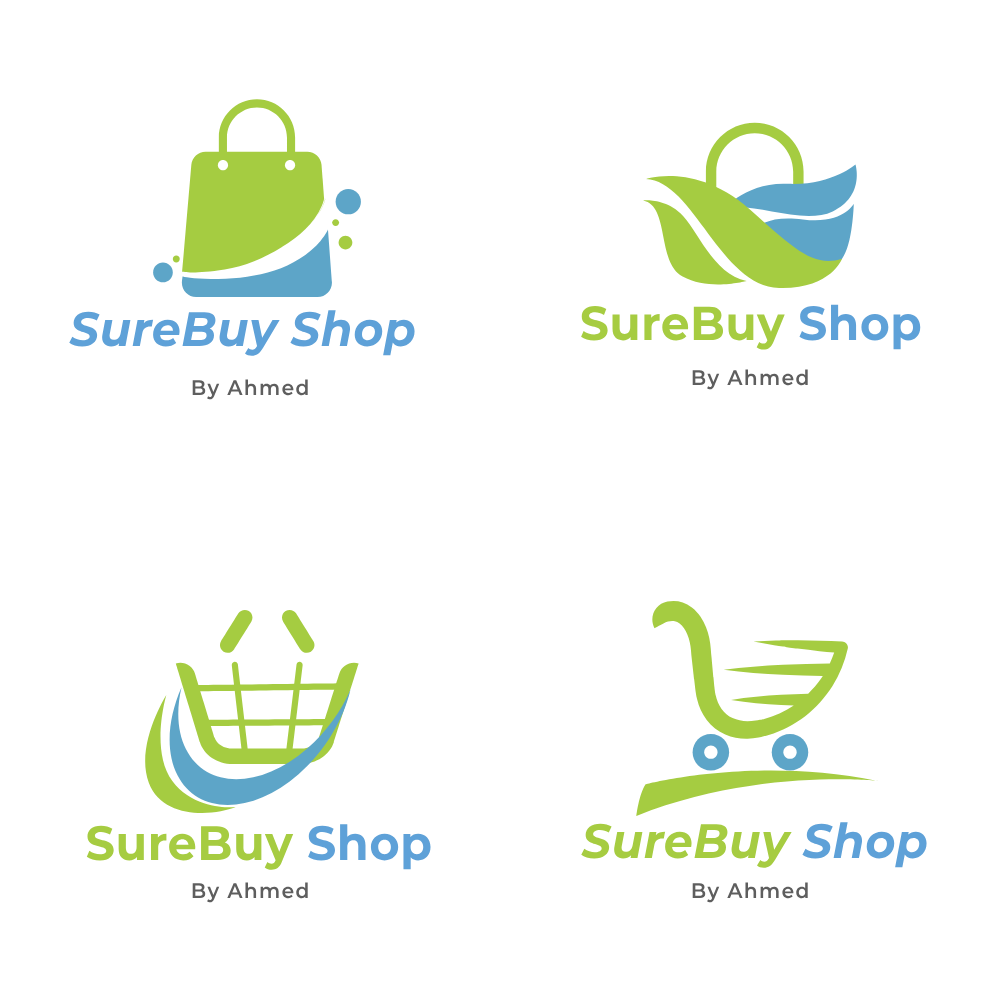
<style>
.page{position:relative;width:1000px;height:1000px;background:#ffffff}
.page>*{position:absolute;margin:0}
.t1{font:47.6px "Montserrat-Bold";letter-spacing:0.01em;color:#a6cc41;scale:0.96 1}
.t2{font:47.6px "Montserrat-Bold";letter-spacing:0.01em;color:#5ea1d8;scale:0.96 1}
.t3{font:48.2px "Montserrat-BoldItalic";letter-spacing:0.01em;color:#5ea1d8;scale:0.96 1}
.t4{font:21.1px "Montserrat-SemiBold";letter-spacing:0.064em;color:#5e5e5e;scale:0.96 1}
.t5{font:48.2px "Montserrat-BoldItalic";letter-spacing:0.01em;color:#a6cc41;scale:0.96 1}
.t6{font:48.2px "Montserrat-Bold";letter-spacing:0.01em;color:#a6cc41;scale:0.96 1}
.t7{font:48.2px "Montserrat-Bold";letter-spacing:0.01em;color:#5ea1d8;scale:0.96 1}
</style>
<div class="page">
<p class="t1" style="left:581px;top:304px;width:340px;height:46px">SureBuy <span class="t2">Shop</span></p>
<p class="t3" style="left:69px;top:310px;width:346px;height:46px">SureBuy Shop</p>
<p class="t4" style="left:692px;top:369px;width:116px;height:21px">By Ahmed</p>
<p class="t4" style="left:192px;top:379px;width:116px;height:21px">By Ahmed</p>
<p class="t5" style="left:581px;top:822px;width:346px;height:46px">SureBuy <span class="t3">Shop</span></p>
<p class="t6" style="left:86px;top:824px;width:345px;height:46px">SureBuy <span class="t7">Shop</span></p>
<p class="t4" style="left:192px;top:882px;width:116px;height:21px">By Ahmed</p>
<p class="t4" style="left:692px;top:882px;width:116px;height:21px">By Ahmed</p>
</div>
